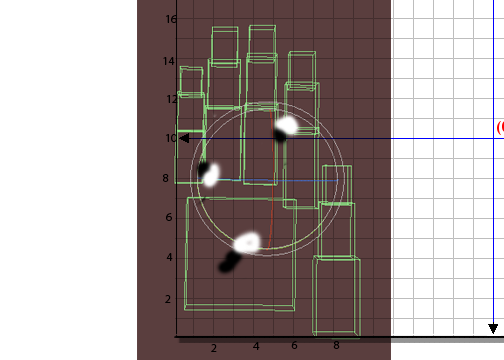
<style>
.page{position:relative;width:504px;height:360px;background:#ffffff}
.page>*{position:absolute;margin:0}
.t1{font:12px "MyriadPro-Regular";color:#000000}
</style>
<div class="page">
<p class="t1" style="left:166px;top:15px;width:11px;height:8px">16</p>
<p class="t1" style="left:163px;top:57px;width:12px;height:8px">14</p>
<p class="t1" style="left:167px;top:95px;width:11px;height:8px">12</p>
<p class="t1" style="left:166px;top:134px;width:11px;height:8px">10</p>
<p class="t1" style="left:163px;top:174px;width:6px;height:8px">8</p>
<p class="t1" style="left:166px;top:213px;width:6px;height:8px">6</p>
<p class="t1" style="left:166px;top:253px;width:7px;height:8px">4</p>
<p class="t1" style="left:165px;top:295px;width:6px;height:8px">2</p>
<p class="t1" style="left:253px;top:342px;width:7px;height:8px">4</p>
<p class="t1" style="left:291px;top:341px;width:7px;height:8px">6</p>
<p class="t1" style="left:333px;top:341px;width:7px;height:8px">8</p>
<p class="t1" style="left:211px;top:344px;width:6px;height:8px">2</p>
</div>
